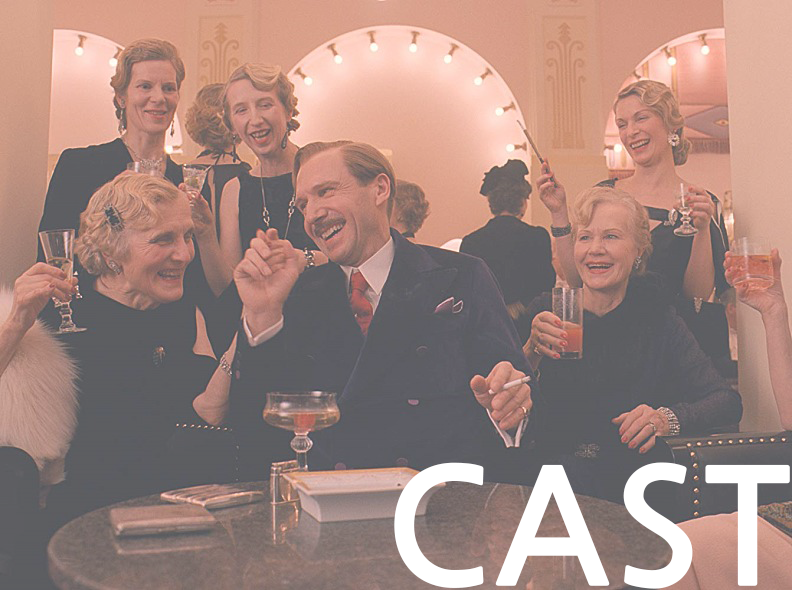
<style>
.page{position:relative;width:792px;height:590px}
.page>*{position:absolute;margin:0}
.t1{font:157.9px "NanumGothicBold";color:#ffffff;font-weight:bold}
</style>
<div class="page">
<p class="t1" style="left:394px;top:462px;width:396px;height:127px">CAST</p>
</div>
